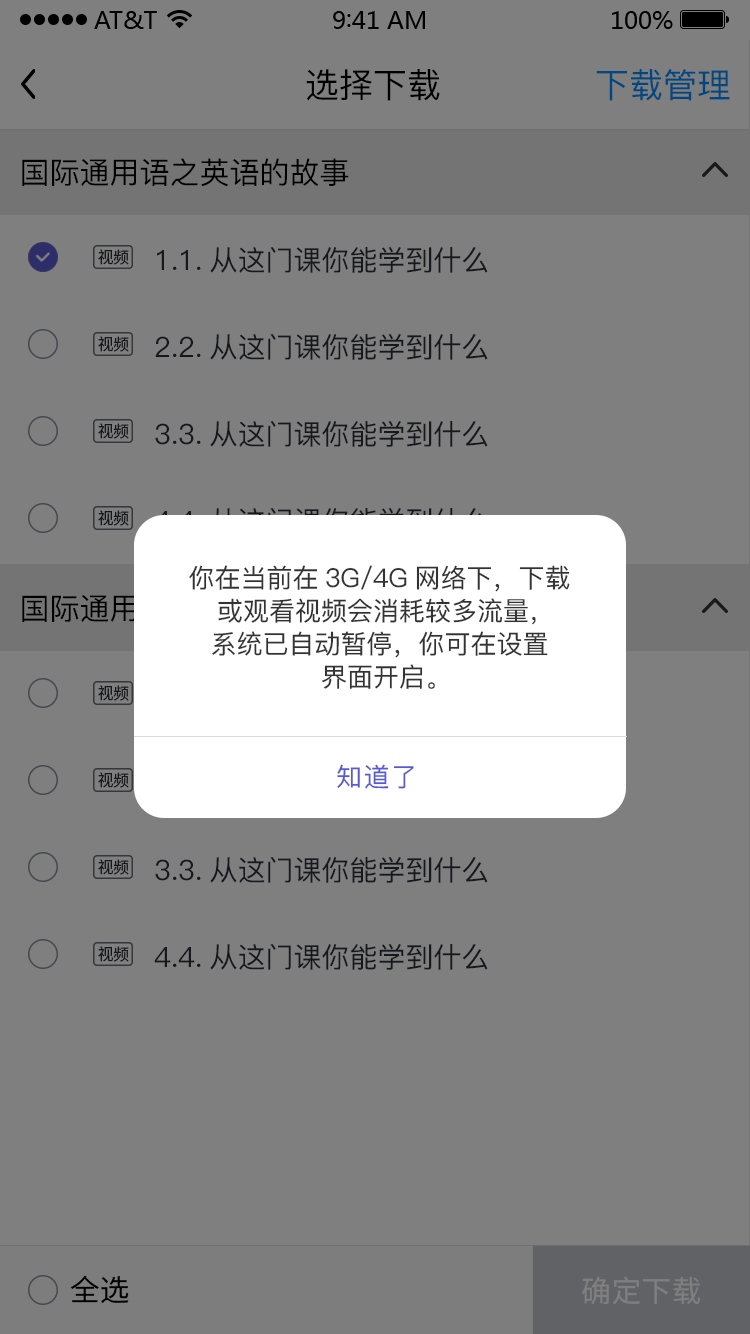
<style>
.page{position:relative;width:750px;height:1334px;background:#7f7f7f}
.page>*{position:absolute;margin:0}
.t1{font:34px "PingFang-SC-Medium";color:#000000}
.t2{font:34px "PingFang-SC-Medium";color:#00487f}
.t3{font:30px "PingFang-SC-Medium";color:#000000}
.t4{font:28px "PingFang-SC-Medium";color:#17181d}
.t5{font:16px "SourceHanSansCN-Regular";color:#17181d}
.t6{font:26px/33px "PingFang-SC-Medium";color:#333333}
.t7{font:26px "PingFang-SC-Medium";letter-spacing:0.06em;color:#595ad3}
.t8{font:30px "SourceHanSansCN-Regular";color:#000000}
.t9{font:30px "SourceHanSansCN-Regular";color:#7f7f7f}
</style>
<div class="page">
<p class="t1" style="left:306px;top:69px;width:134px;height:32px">选择下载</p>
<p class="t2" style="left:596px;top:69px;width:134px;height:32px">下载管理</p>
<p class="t3" style="left:22px;top:158px;width:327px;height:29px">国际通用语之英语的故事</p>
<p class="t4" style="left:157px;top:246px;width:331px;height:27px">1.1.从这门课你能学到什么</p>
<p class="t5" style="left:98px;top:249px;width:31px;height:16px">视频</p>
<p class="t5" style="left:98px;top:336px;width:31px;height:16px">视频</p>
<p class="t4" style="left:155px;top:333px;width:333px;height:27px">2.2.从这门课你能学到什么</p>
<p class="t5" style="left:98px;top:423px;width:31px;height:16px">视频</p>
<p class="t4" style="left:155px;top:420px;width:333px;height:27px">3.3.从这门课你能学到什么</p>
<p class="t5" style="left:98px;top:510px;width:31px;height:16px">视频</p>
<p class="t6" style="left:189px;top:565px;width:381px;height:124px;text-align:center">你在当前在3G/4G网络下，下载<br>或观看视频会消耗较多流量，<br>系统已自动暂停，你可在设置<br>界面开启。</p>
<p class="t5" style="left:98px;top:685px;width:31px;height:16px">视频</p>
<p class="t5" style="left:98px;top:772px;width:31px;height:16px">视频</p>
<p class="t7" style="left:337px;top:764px;width:77px;height:25px">知道了</p>
<p class="t4" style="left:155px;top:856px;width:333px;height:27px">3.3.从这门课你能学到什么</p>
<p class="t5" style="left:98px;top:859px;width:31px;height:16px">视频</p>
<p class="t5" style="left:98px;top:946px;width:31px;height:16px">视频</p>
<p class="t4" style="left:154px;top:943px;width:334px;height:27px">4.4.从这门课你能学到什么</p>
<p class="t8" style="left:70px;top:1275px;width:59px;height:29px">全选</p>
<p class="t9" style="left:582px;top:1276px;width:119px;height:29px">确定下载</p>
</div>
